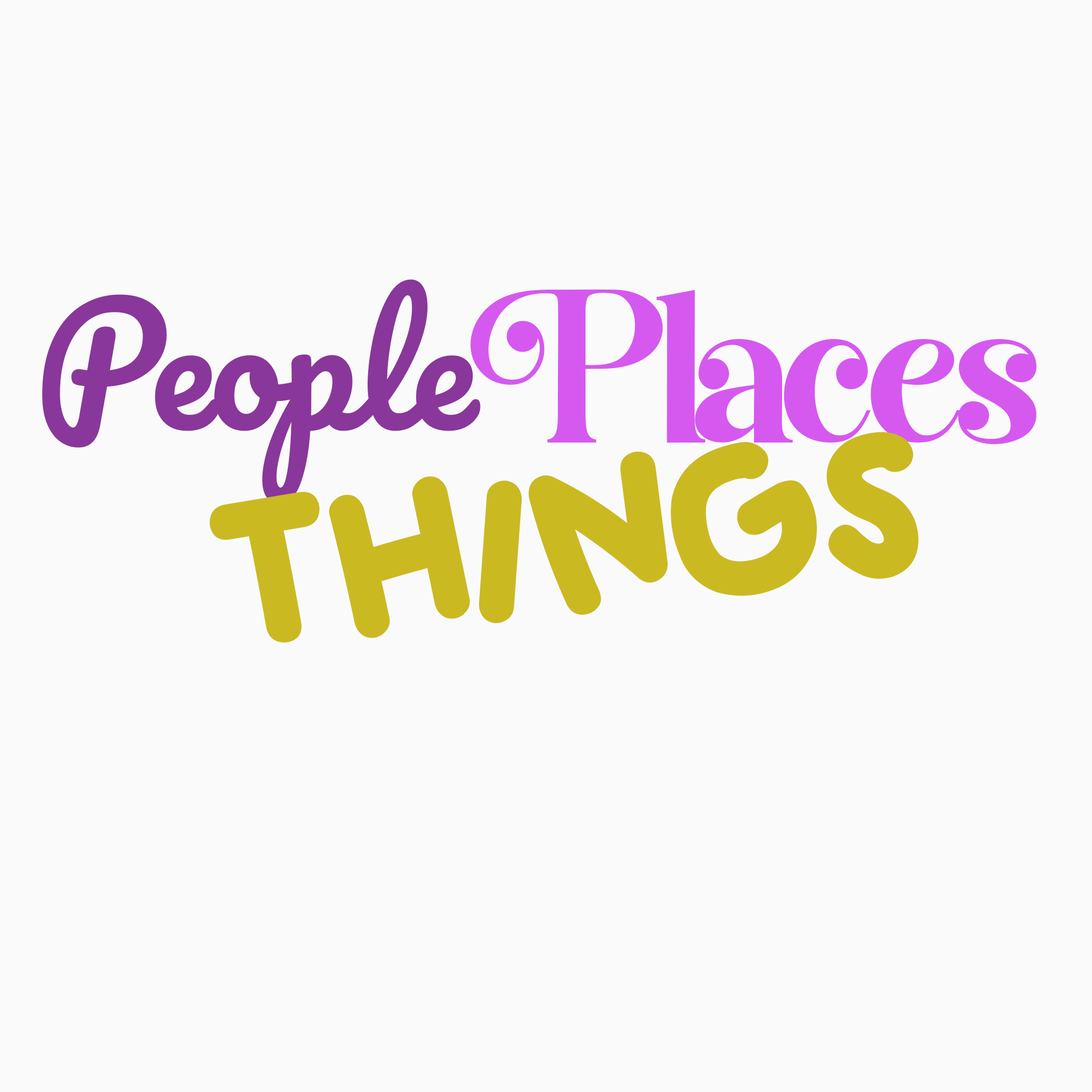
<style>
.page{position:relative;width:1092px;height:1092px;background:#fafafa}
.page>*{position:absolute;margin:0}
.t1{font:160.4px "Pacifico-Regular";color:#89379a}
.t2{font:160.4px "Pacifico-Regular";letter-spacing:-0.04em;color:#89379a}
.t3{font:130px "BestSwashedPERSONALUSE-Regular";letter-spacing:-0.06em;color:#d559ef}
.t4{font:156px "ADELIA";letter-spacing:-0.04em;color:#cbb922}
</style>
<div class="page">
<p class="t1" style="left:42px;top:279px;width:438px;height:224px"><span class="t2">Pe</span>ople</p>
<p class="t3" style="left:470px;top:289px;width:567px;height:155px">Places</p>
<p class="t4" style="left:210px;top:432px;width:709px;height:211px;rotate:-7deg">THINGS</p>
</div>
